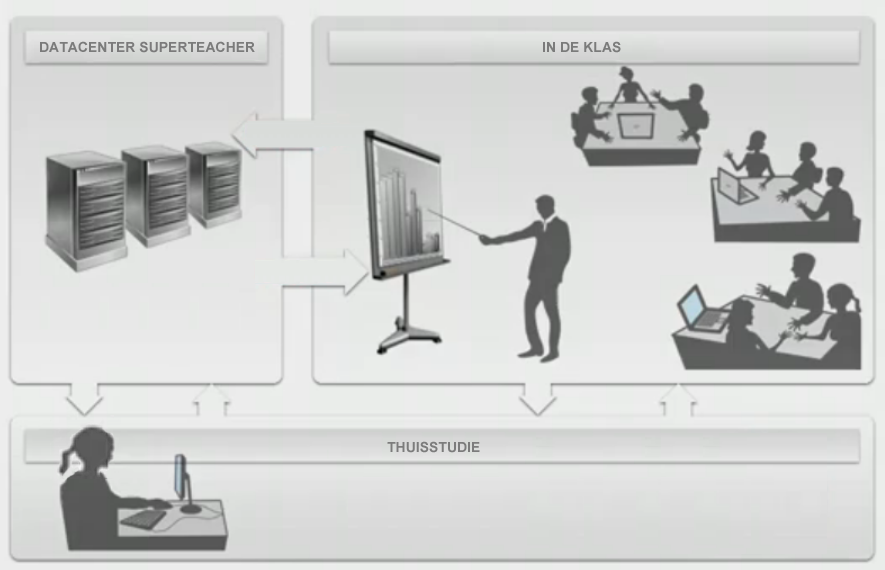
<style>
.page{position:relative;width:885px;height:570px}
.page>*{position:absolute;margin:0}
.t1{font:14px "Arial-BoldMT";color:#7b7b7b;text-transform:uppercase}
</style>
<div class="page">
<p class="t1" style="left:40px;top:41px;width:215px;height:12px">Datacenter SuperTeacher</p>
<p class="t1" style="left:543px;top:41px;width:78px;height:12px">In de klas</p>
<p class="t1" style="left:387px;top:441px;width:93px;height:12px">Thuisstudie</p>
</div>
